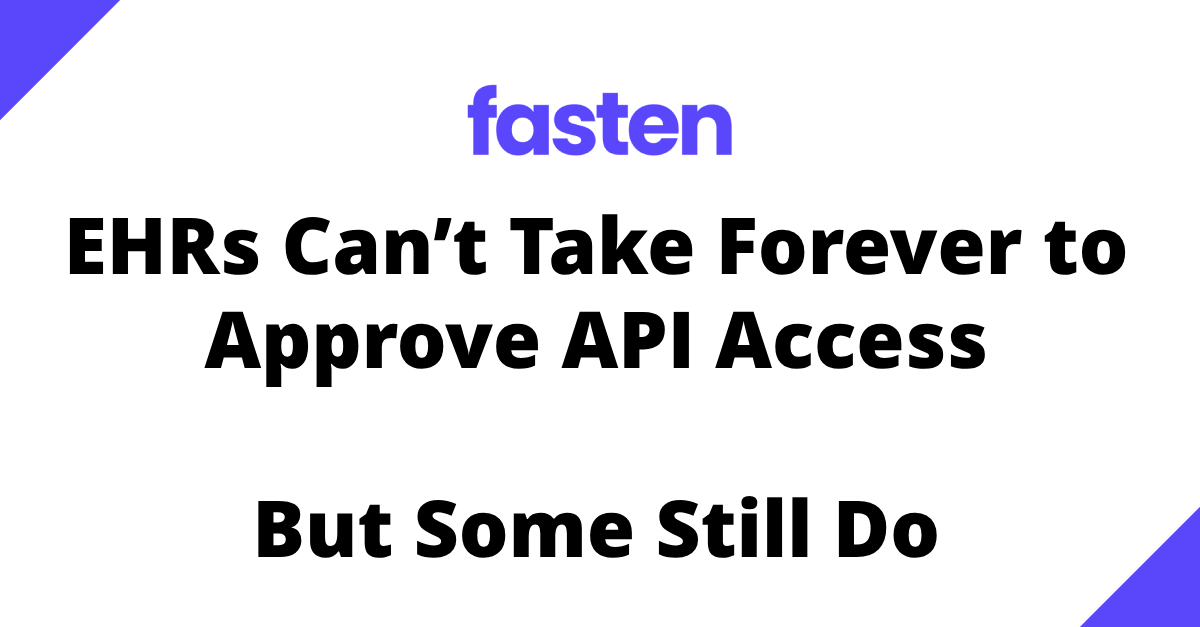
<style>
.page{position:relative;width:1200px;height:627px;background:#ffffff}
.page>*{position:absolute;margin:0}
.t1{font:78.6px "OpenSans-Extrabold";color:#000000}
</style>
<div class="page">
<p class="t1" style="left:69px;top:214px;width:1057px;height:344px;text-align:center">EHRs Can’t Take Forever to Approve API Access<br><br>But Some Still Do</p>
</div>
